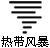
<style>
.page{position:relative;width:50px;height:48px;background:#ffffff}
.page>*{position:absolute;margin:0}
.t1{font:12px "OPPOSans-R";color:#000000}
</style>
<div class="page">
<p class="t1" style="left:1px;top:36px;width:48px;height:11px">热带风暴</p>
</div>
